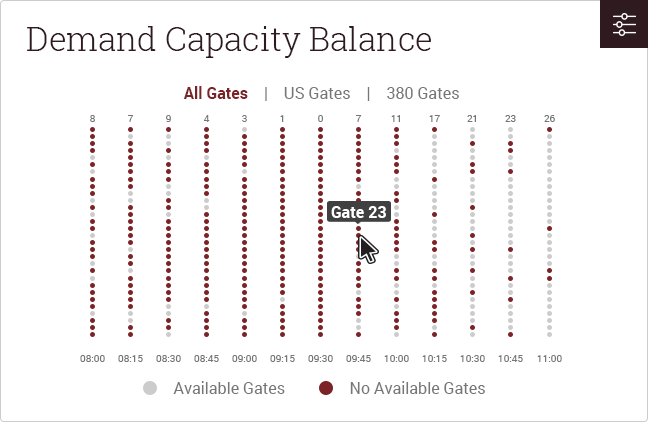
<style>
.page{position:relative;width:648px;height:422px;background:#ffffff}
.page>*{position:absolute;margin:0}
.t1{font:33px "RobotoSlab-Light";color:#2f1b1f}
.t2{font:16px "Roboto-Regular";color:#767676}
.t3{font:16px "Roboto-Bold";color:#7b2326}
.t4{font:10px "Roboto-Regular";color:#767676}
.t5{font:16px "Roboto-Bold";color:#ffffff}
</style>
<div class="page">
<p class="t1" style="left:27px;top:26px;width:404px;height:32px">Demand Capacity Balance</p>
<p class="t2" style="left:183px;top:86px;width:276px;height:15px"><span class="t3">All Gates</span>    |    US Gates    |    380 Gates</p>
<p class="t4" style="left:90px;top:115px;width:5px;height:7px">8</p>
<p class="t4" style="left:128px;top:115px;width:6px;height:7px">7</p>
<p class="t4" style="left:166px;top:115px;width:5px;height:7px">9</p>
<p class="t4" style="left:203px;top:115px;width:7px;height:7px">4</p>
<p class="t4" style="left:242px;top:115px;width:5px;height:7px">3</p>
<p class="t4" style="left:280px;top:115px;width:4px;height:7px">1</p>
<p class="t4" style="left:318px;top:115px;width:5px;height:7px">0</p>
<p class="t4" style="left:356px;top:115px;width:6px;height:7px">7</p>
<p class="t4" style="left:391px;top:115px;width:9px;height:7px">11</p>
<p class="t4" style="left:429px;top:115px;width:11px;height:7px">17</p>
<p class="t4" style="left:467px;top:115px;width:9px;height:7px">21</p>
<p class="t4" style="left:505px;top:115px;width:11px;height:7px">23</p>
<p class="t4" style="left:544px;top:115px;width:11px;height:7px">26</p>
<p class="t5" style="left:331px;top:206px;width:55px;height:12px">Gate 23</p>
<p class="t4" style="left:80px;top:355px;width:25px;height:7px">08:00</p>
<p class="t4" style="left:118px;top:355px;width:25px;height:7px">08:15</p>
<p class="t4" style="left:156px;top:355px;width:25px;height:7px">08:30</p>
<p class="t4" style="left:194px;top:355px;width:25px;height:7px">08:45</p>
<p class="t4" style="left:232px;top:355px;width:25px;height:7px">09:00</p>
<p class="t4" style="left:270px;top:355px;width:25px;height:7px">09:15</p>
<p class="t4" style="left:308px;top:355px;width:25px;height:7px">09:30</p>
<p class="t4" style="left:346px;top:355px;width:25px;height:7px">09:45</p>
<p class="t4" style="left:384px;top:355px;width:25px;height:7px">10:00</p>
<p class="t4" style="left:422px;top:355px;width:25px;height:7px">10:15</p>
<p class="t4" style="left:460px;top:355px;width:25px;height:7px">10:30</p>
<p class="t4" style="left:498px;top:355px;width:25px;height:7px">10:45</p>
<p class="t4" style="left:537px;top:355px;width:25px;height:7px">11:00</p>
<p class="t2" style="left:173px;top:381px;width:112px;height:13px">Available Gates</p>
<p class="t2" style="left:350px;top:381px;width:135px;height:13px">No Available Gates</p>
</div>
